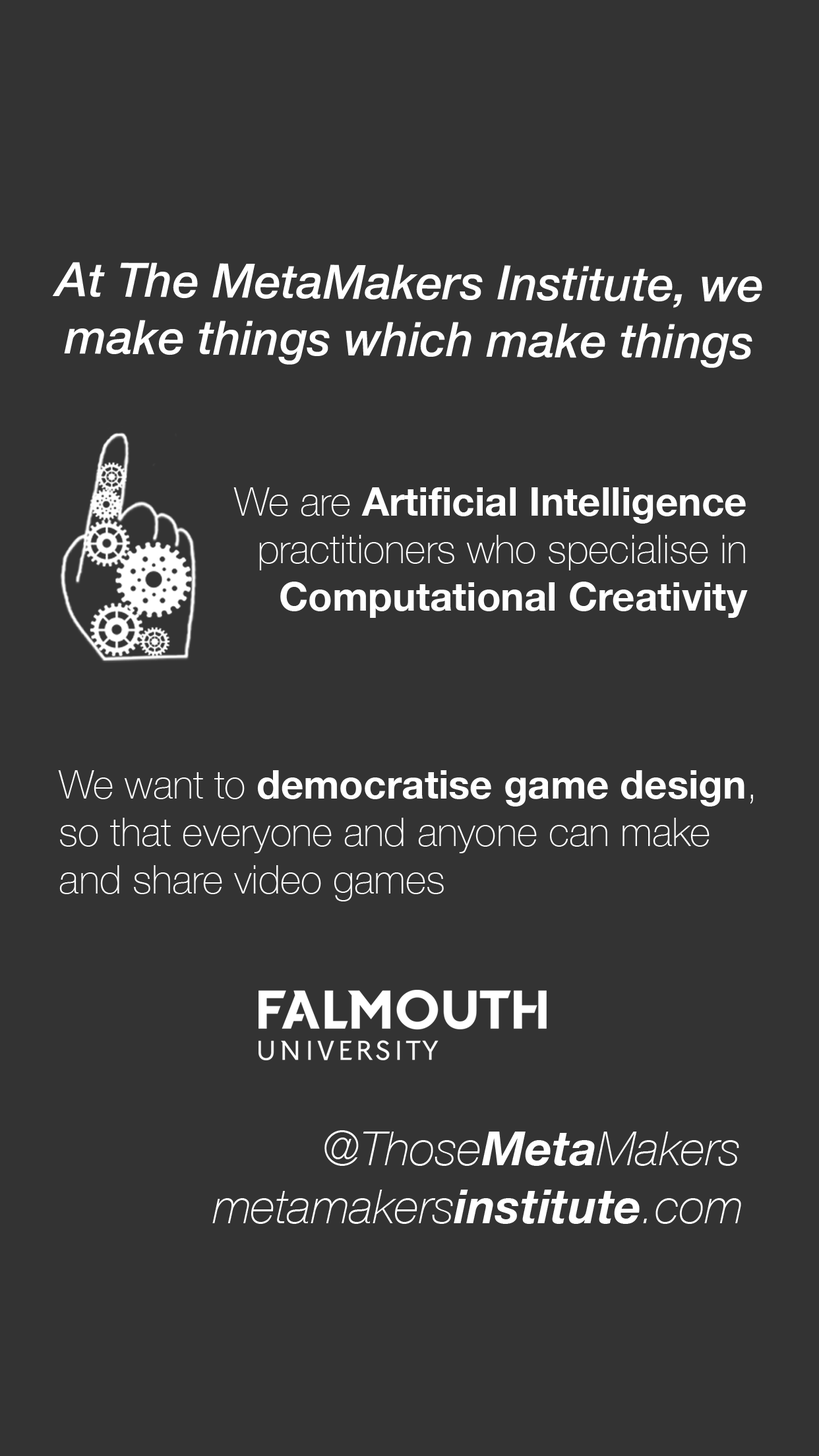
<style>
.page{position:relative;width:819px;height:1456px;background:#333333}
.page>*{position:absolute;margin:0}
.t1{font:47.5px "HelveticaNeue-MediumItalic";color:#ffffff}
.t2{font:39.6px "HelveticaNeue-Thin";color:#ffffff}
.t3{font:39.6px "HelveticaNeue-Bold";color:#ffffff}
.t4{font:47.5px "HelveticaNeue-ThinItalic";color:#ffffff}
.t5{font:47.5px "HelveticaNeue-BoldItalic";color:#ffffff}
</style>
<div class="page">
<p class="t1" style="left:52px;top:262px;width:710px;height:106px;text-align:center">At The MetaMakers Institute, we make things which make things</p>
<p class="t2" style="left:233px;top:487px;width:515px;height:131px;text-align:right">We are <span class="t3">Artificial Intelligence</span> practitioners who specialise in <span class="t3">Computational Creativity</span></p>
<p class="t2" style="left:58px;top:770px;width:695px;height:131px">We want to <span class="t3">democratise game design</span>, so that everyone and anyone can make <br>and share video games</p>
<p class="t4" style="left:324px;top:1130px;width:415px;height:36px">@Those<span class="t5">Meta</span>Makers</p>
<p class="t4" style="left:212px;top:1190px;width:529px;height:34px">metamakers<span class="t5">institute</span>.com</p>
</div>
